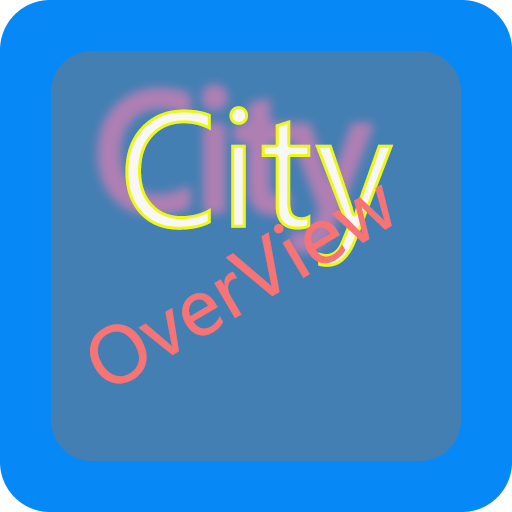
<style>
.page{position:relative;width:512px;height:512px;background:#437fb3}
.page>*{position:absolute;margin:0}
.t1{font:153.3px "MicrosoftYaHeiUI"}
.t2{font:75px "MicrosoftYaHeiUI";color:#f87373}
</style>
<div class="page">
<p class="t1" style="left:125px;top:106px;width:269px;height:161px">City</p>
<p class="t2" style="left:90px;top:184px;width:302px;height:200px;rotate:-31deg">OverView</p>
</div>
